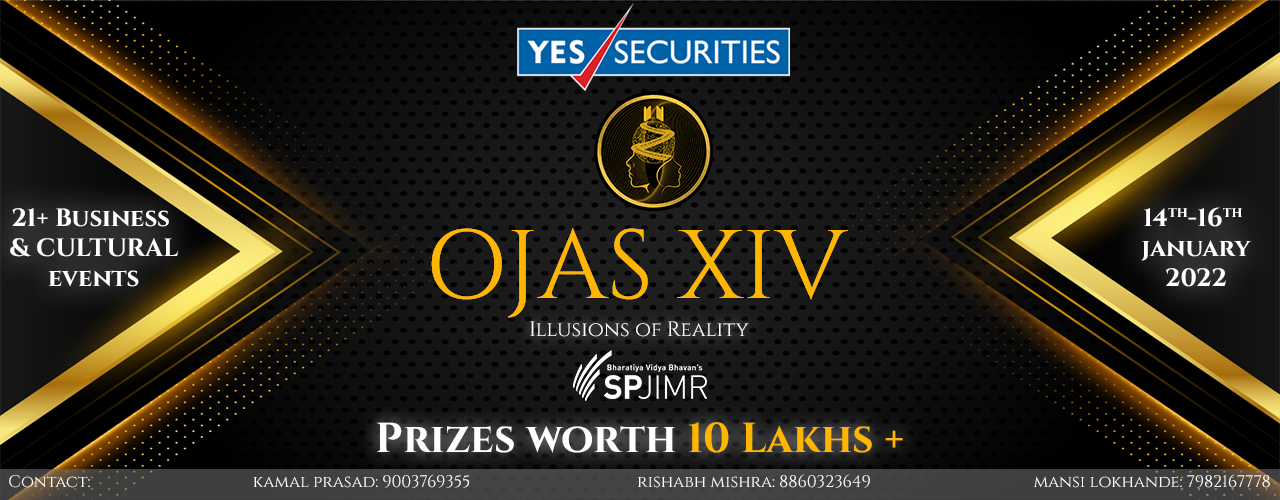
<style>
.page{position:relative;width:1280px;height:500px}
.page>*{position:absolute;margin:0}
.t1{font:25px "Cinzel-Bold";color:#ffffff}
.t2{font:97.2px "Cinzel-Regular";color:#ffb600}
.t3{font:20.8px "Cinzel-Regular";color:#ffffff}
.t4{font:41.7px "Cinzel-Bold";color:#ffffff}
.t5{font:41.7px "Cinzel-Bold";color:#ffb600}
.t6{font:16.7px "Cinzel-Regular";color:#ffffff}
</style>
<div class="page">
<p class="t1" style="left:10px;top:208px;width:169px;height:79px;text-align:center">21+ Business <br>&amp; CULTURAL<br>events</p>
<p class="t1" style="left:1141px;top:207px;width:111px;height:80px;text-align:center">14th-16th <br>january<br>2022</p>
<p class="t2" style="left:431px;top:228px;width:417px;height:90px">OJAS XIV</p>
<p class="t3" style="left:530px;top:321px;width:219px;height:16px">Illusions of Reality</p>
<p class="t4" style="left:377px;top:422px;width:526px;height:31px">Prizes worth <span class="t5">10 Lakhs +</span></p>
<p class="t6" style="left:9px;top:474px;width:1261px;height:14px">Contact:                                       kamal prasad: 9003769355                                        rishabh mishra: 8860323649                                       mansi lokhande: 7982167778</p>
</div>
